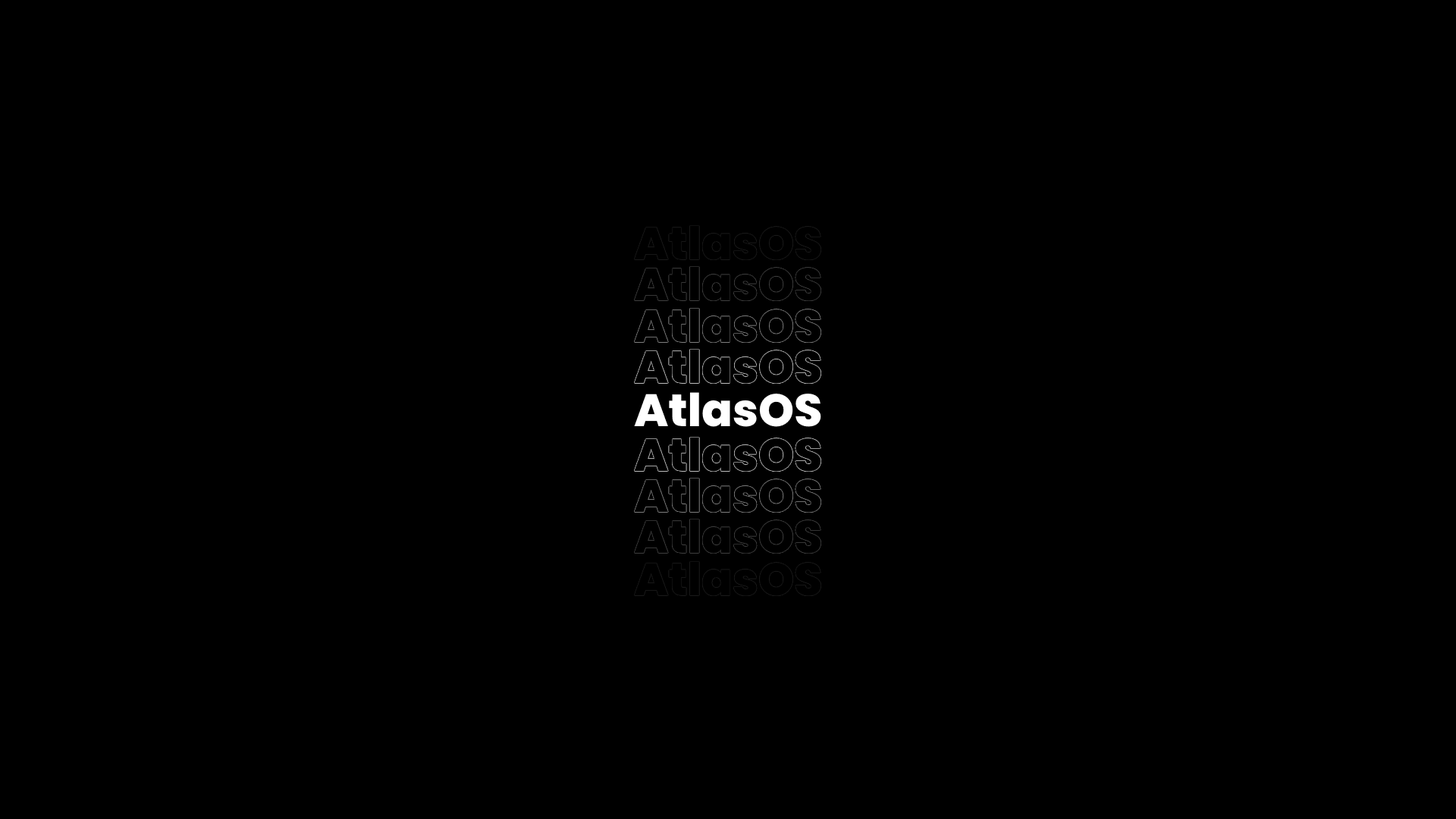
<style>
.page{position:relative;width:1456px;height:819px;background:#000000}
.page>*{position:absolute;margin:0}
.t1{font:45.5px "Poppins-ExtraBold";color:#ffffff}
</style>
<div class="page">
<p class="t1" style="left:634px;top:392px;width:187px;height:35px">AtlasOS</p>
</div>
